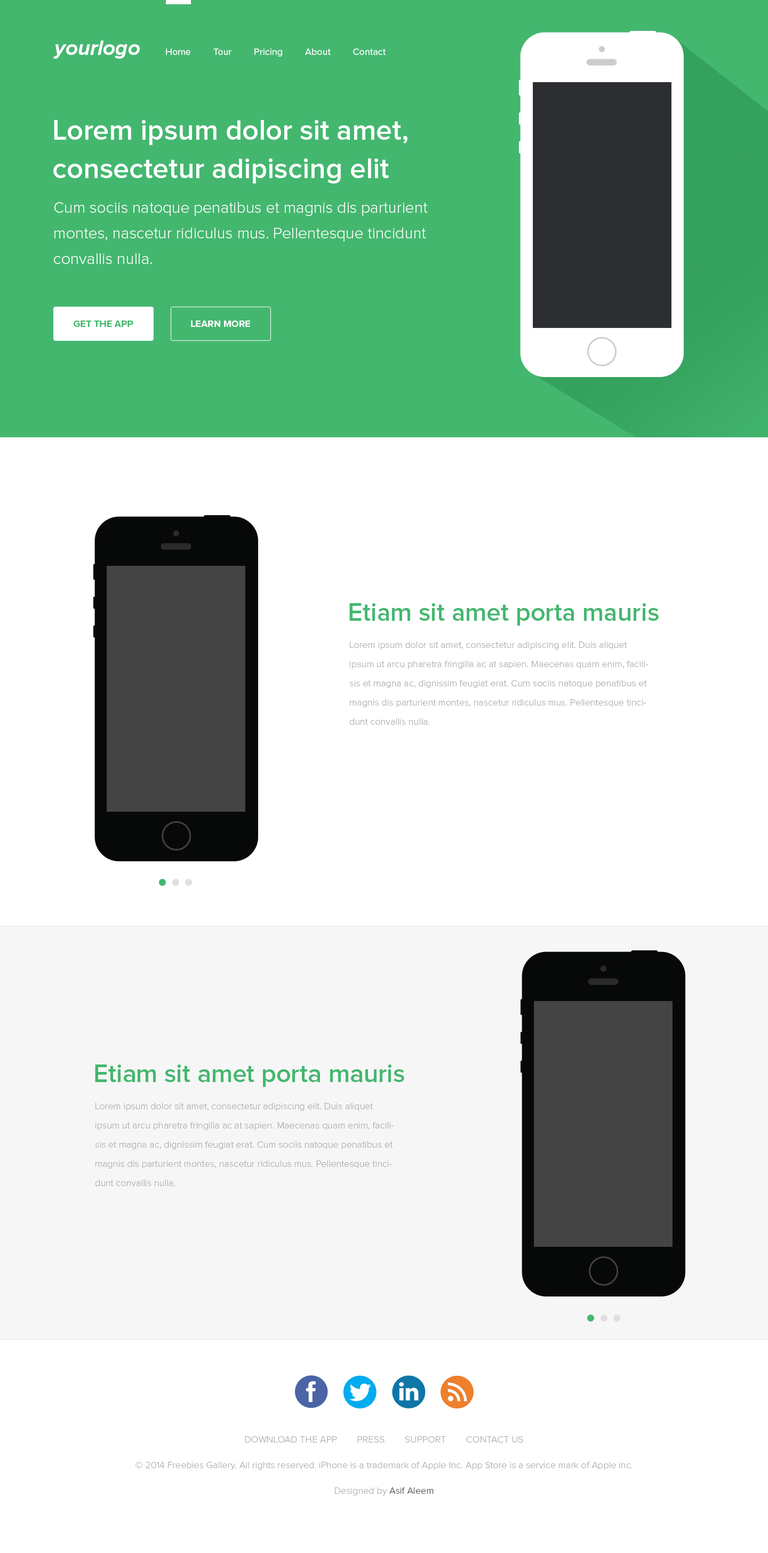
<style>
.page{position:relative;width:768px;height:1553px;background:#ffffff}
.page>*{position:absolute;margin:0}
.t1{font:21.3px "ProximaNova-BoldIt";color:#ffffff}
.t2{font:9.6px "ProximaNova-Regular";color:#ffffff}
.t3{font:28.8px/38.4px "ProximaNova-Semibold";color:#ffffff}
.t4{font:16px/25.6px "ProximaNova-Light";color:#ffffff}
.t5{font:9.6px "ProximaNova-Bold";color:#44b76f}
.t6{font:9.6px "ProximaNova-Bold";color:#ffffff}
.t7{font:25.6px "ProximaNova-Semibold";color:#44b76f}
.t8{font:9.6px/19.2px "ProximaNova-Light";color:#acacac}
.t9{font:9.6px/25.6px "ProximaNova-Light";color:#acacac}
.t10{font:9.6px/25.6px "ProximaNova-Light";color:#444444}
</style>
<div class="page">
<p class="t1" style="left:53px;top:41px;width:87px;height:18px">yourlogo</p>
<p class="t2" style="left:166px;top:48px;width:220px;height:9px">Home         Tour         Pricing         About         Contact</p>
<p class="t3" style="left:53px;top:120px;width:354px;height:63px">Lorem ipsum dolor sit amet,<br>consectetur adipiscing elit</p>
<p class="t4" style="left:54px;top:202px;width:374px;height:62px">Cum sociis natoque penatibus et magnis dis parturient montes, nascetur ridiculus mus. Pellentesque tincidunt <br>convallis nulla.</p>
<p class="t5" style="left:74px;top:320px;width:59px;height:7px">GET THE APP</p>
<p class="t6" style="left:191px;top:320px;width:59px;height:7px">LEARN MORE</p>
<p class="t7" style="left:349px;top:603px;width:310px;height:23px">Etiam sit amet porta mauris</p>
<p class="t8" style="left:349px;top:641px;width:299px;height:84px">Lorem ipsum dolor sit amet, consectetur adipiscing elit. Duis aliquet ipsum ut arcu pharetra fringilla ac at sapien. Maecenas quam enim, facilisis et magna ac, dignissim feugiat erat. Cum sociis natoque penatibus et magnis dis parturient montes, nascetur ridiculus mus. Pellentesque tincidunt convallis nulla.</p>
<p class="t7" style="left:95px;top:1064px;width:309px;height:23px">Etiam sit amet porta mauris</p>
<p class="t8" style="left:95px;top:1102px;width:299px;height:84px">Lorem ipsum dolor sit amet, consectetur adipiscing elit. Duis aliquet ipsum ut arcu pharetra fringilla ac at sapien. Maecenas quam enim, facilisis et magna ac, dignissim feugiat erat. Cum sociis natoque penatibus et magnis dis parturient montes, nascetur ridiculus mus. Pellentesque tincidunt convallis nulla.</p>
<p class="t9" style="left:135px;top:1436px;width:497px;height:59px;text-align:center">DOWNLOAD THE APP        PRESS        SUPPORT        CONTACT US<br>© 2014 Freebies Gallery. All rights reserved. iPhone is a trademark of Apple Inc. App Store is a service mark of Apple inc.<br>Designed by <span class="t10">Asif Aleem</span></p>
</div>
